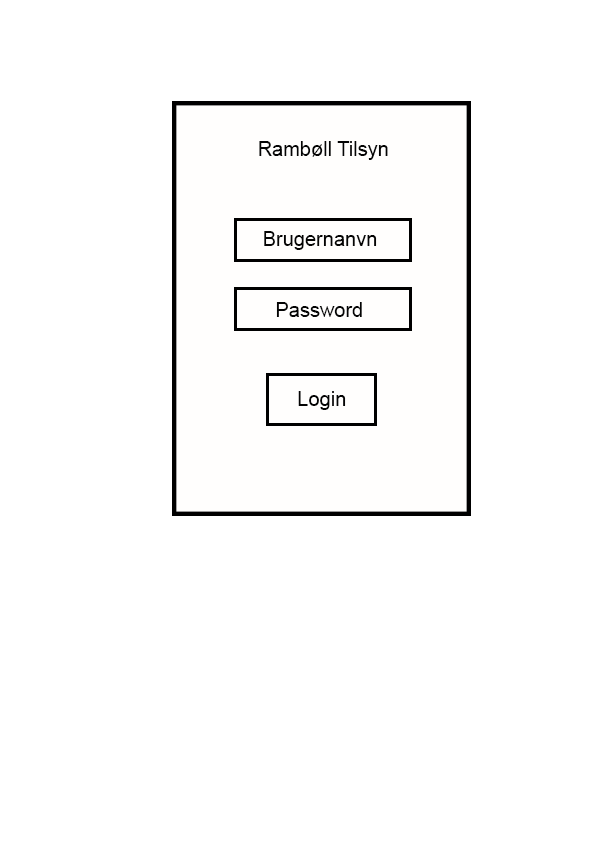
<style>
.page{position:relative;width:595px;height:842px;background:#ffffff}
.page>*{position:absolute;margin:0}
.t1{font:20px "ArialMT";color:#040404}
</style>
<div class="page">
<p class="t1" style="left:259px;top:141px;width:129px;height:19px">Rambøll Tilsyn</p>
<p class="t1" style="left:264px;top:231px;width:113px;height:19px">Brugernanvn</p>
<p class="t1" style="left:276px;top:302px;width:86px;height:15px">Password</p>
<p class="t1" style="left:298px;top:391px;width:48px;height:19px">Login</p>
</div>
